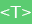
<style>
.page{position:relative;width:32px;height:24px;background:#5bcc71}
.page>*{position:absolute;margin:0}
.t1{font:16.2px "ArialMT";color:#ffffff;scale:1.11 1}
</style>
<div class="page">
<p class="t1" style="left:0px;top:6px;width:31px;height:12px">&lt;T&gt;</p>
</div>
